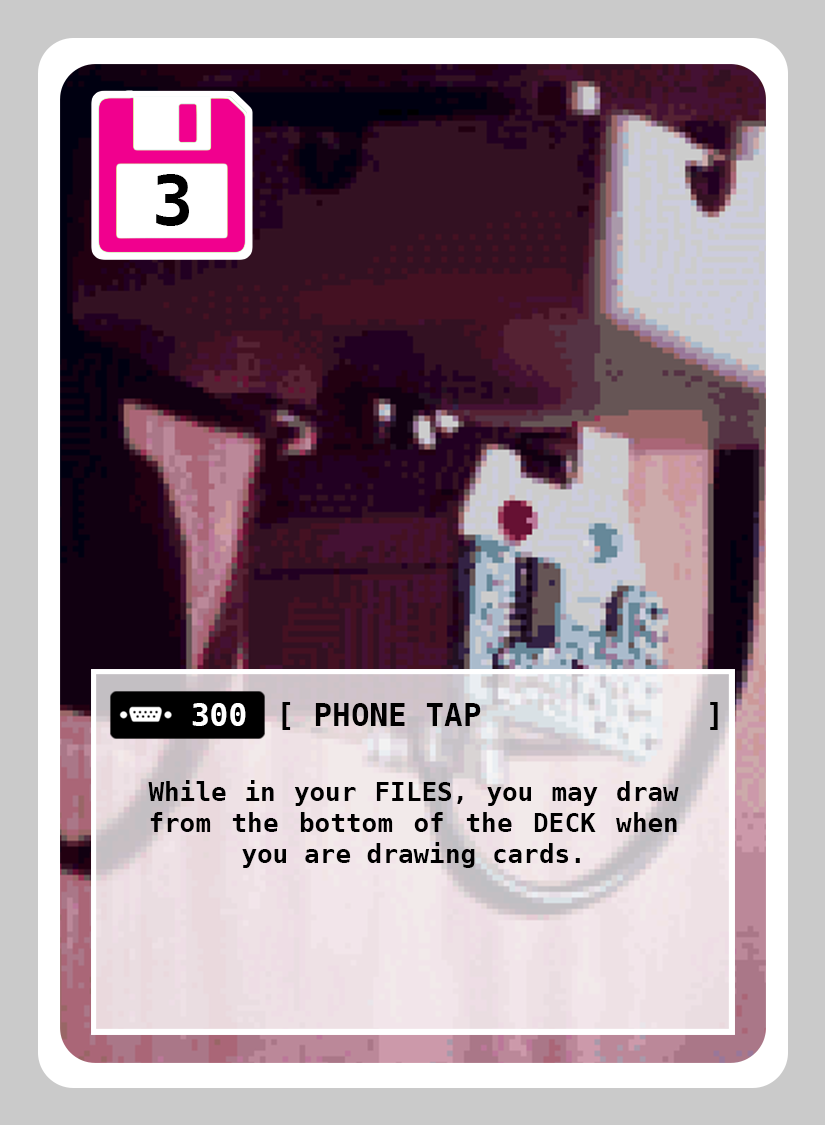
<style>
.page{position:relative;width:825px;height:1125px}
.page>*{position:absolute;margin:0}
.t1{font:69px "DejaVuSansMono-Bold";color:#000000}
.t2{font:31px "DejaVuSansMono-Bold";color:#ffffff}
.t3{font:31px "DejaVuSansMono-Bold";color:#000000}
.t4{font:26px "DejaVuSansMono-Bold";color:#000000}
</style>
<div class="page">
<p class="t1" style="left:156px;top:174px;width:33px;height:52px">3</p>
<p class="t2" style="left:192px;top:703px;width:54px;height:23px">300</p>
<p class="t3" style="left:315px;top:703px;width:166px;height:23px">PHONE TAP</p>
<p class="t4" style="left:148px;top:780px;width:531px;height:88px;text-align:justify">While in your FILES, you may draw from the bottom of the DECK when you are drawing cards.</p>
</div>
